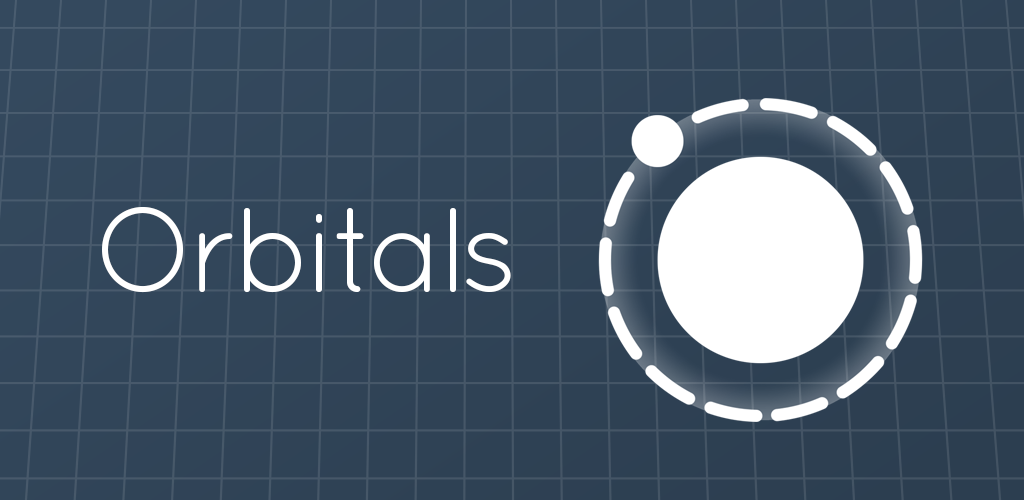
<style>
.page{position:relative;width:1024px;height:500px}
.page>*{position:absolute;margin:0}
.t1{font:120px "Quicksand-Regular";letter-spacing:-0.06em;color:#ffffff}
</style>
<div class="page">
<p class="t1" style="left:102px;top:207px;width:409px;height:86px">Orbitals</p>
</div>
